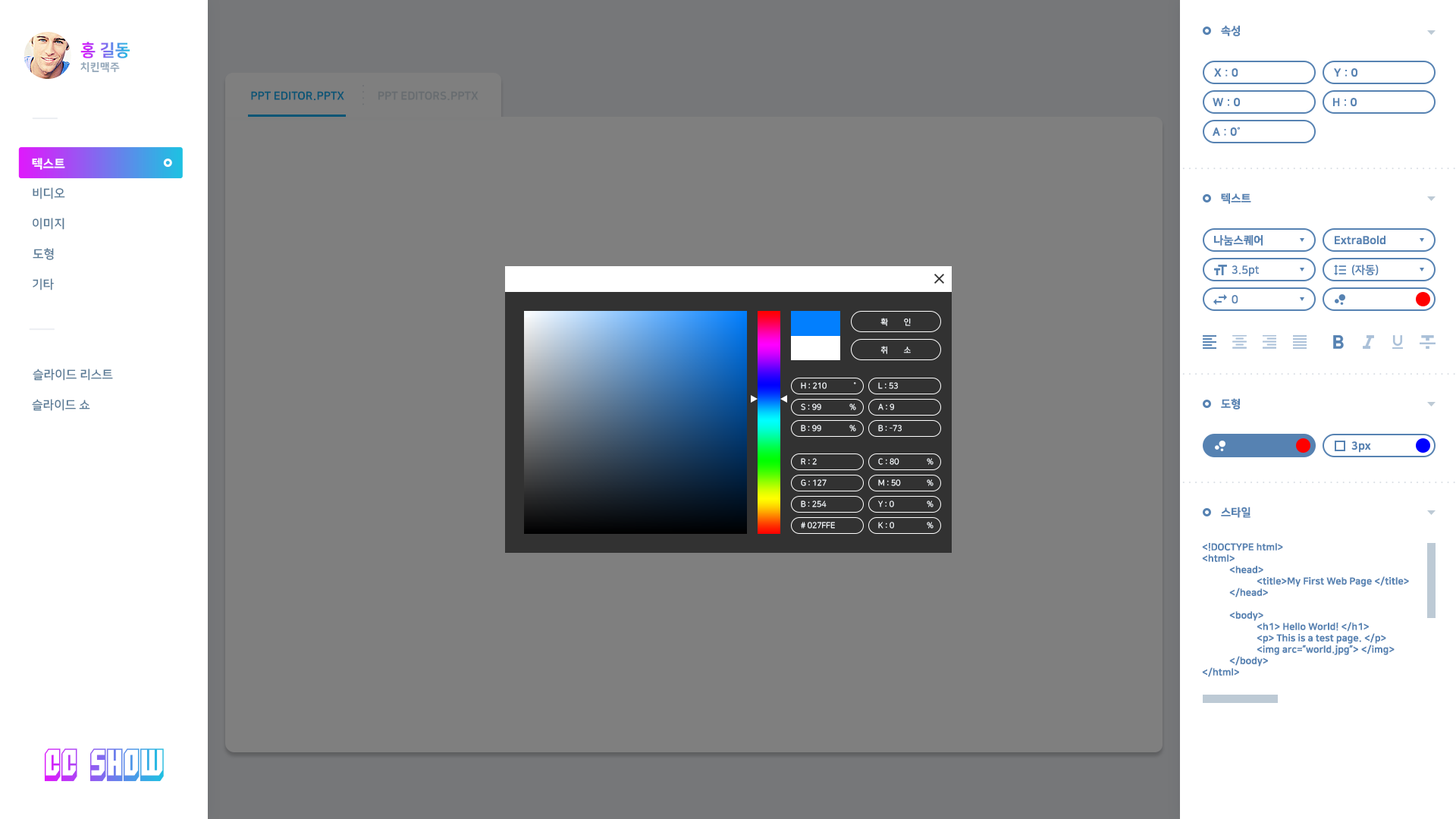
<style>
.page{position:relative;width:1456px;height:819px;background:#7f7f7f}
.page>*{position:absolute;margin:0}
.t1{font:11.1px "NanumSquareEB";color:#5682b2}
.t2{font:16.7px "NanumSquareEB";text-transform:uppercase}
.t3{font:10.6px "NanumSquareEB";letter-spacing:0.025em;color:#94a8ba;text-transform:uppercase}
.t4{font:11.1px "NanumSquareEB";color:#095575;text-transform:uppercase}
.t5{font:11.1px "NanumSquareEB";color:#676c70;text-transform:uppercase}
.t6{font:12.1px "NanumSquareEB";color:#ffffff;text-transform:uppercase}
.t7{font:12.1px "NanumSquareB";color:#597a96;text-transform:uppercase}
.t8{font:11.1px "NanumSquareB";color:#5682b2}
.t9{font:7.9px "NanumSquareR";color:#f7fbfe;text-transform:uppercase}
.t10{font:7.9px "NanumSquareR";text-transform:uppercase}
.t11{font:9.5px "NanumSquareEB";color:#5682b2}
.t12{font:31.6px "Blockt"}
</style>
<div class="page">
<p class="t1" style="left:1221px;top:25px;width:19px;height:11px">속성</p>
<p class="t2" style="left:80px;top:42px;width:50px;height:16px">홍 길동</p>
<p class="t3" style="left:80px;top:61px;width:40px;height:12px">치킨맥주</p>
<p class="t1" style="left:1214px;top:68px;width:24px;height:9px">X : 0</p>
<p class="t1" style="left:1334px;top:68px;width:23px;height:9px">Y : 0</p>
<p class="t4" style="left:251px;top:91px;width:93px;height:10px">PPT editor.pptx</p>
<p class="t5" style="left:378px;top:91px;width:101px;height:10px">PPT EDITORS.PPTX</p>
<p class="t1" style="left:1213px;top:98px;width:27px;height:9px">W : 0</p>
<p class="t1" style="left:1333px;top:98px;width:24px;height:9px">H : 0</p>
<p class="t1" style="left:1213px;top:127px;width:27px;height:9px">A : 0˚</p>
<p class="t6" style="left:32px;top:158px;width:33px;height:12px">텍스트</p>
<p class="t7" style="left:33px;top:187px;width:32px;height:12px">비디오</p>
<p class="t1" style="left:1221px;top:193px;width:30px;height:11px">텍스트</p>
<p class="t7" style="left:33px;top:218px;width:31px;height:12px">이미지</p>
<p class="t1" style="left:1214px;top:235px;width:49px;height:11px">나눔스퀘어</p>
<p class="t1" style="left:1335px;top:235px;width:50px;height:10px">ExtraBold</p>
<p class="t7" style="left:33px;top:248px;width:21px;height:12px">도형</p>
<p class="t8" style="left:1232px;top:265px;width:28px;height:12px">3.5pt</p>
<p class="t8" style="left:1352px;top:265px;width:27px;height:10px">(자동)</p>
<p class="t7" style="left:33px;top:278px;width:21px;height:12px">기타</p>
<p class="t8" style="left:1232px;top:295px;width:6px;height:9px">0</p>
<p class="t9" style="left:880px;top:318px;width:31px;height:8px">확        인</p>
<p class="t9" style="left:880px;top:346px;width:31px;height:8px">취        소</p>
<p class="t7" style="left:33px;top:369px;width:80px;height:12px">슬라이드 리스트</p>
<p class="t9" style="left:801px;top:382px;width:26px;height:7px">H : 210</p>
<p class="t10" style="left:854px;top:382px;width:2px;height:2px">˚</p>
<p class="t9" style="left:878px;top:382px;width:20px;height:7px">L : 53</p>
<p class="t7" style="left:32px;top:399px;width:58px;height:12px">슬라이드 쇼</p>
<p class="t1" style="left:1221px;top:398px;width:19px;height:11px">도형</p>
<p class="t9" style="left:801px;top:403px;width:20px;height:7px">S : 99</p>
<p class="t9" style="left:849px;top:403px;width:7px;height:7px">%</p>
<p class="t9" style="left:878px;top:403px;width:16px;height:7px">A : 9</p>
<p class="t9" style="left:801px;top:425px;width:20px;height:6px">B : 99</p>
<p class="t9" style="left:849px;top:425px;width:7px;height:6px">%</p>
<p class="t9" style="left:878px;top:425px;width:24px;height:6px">B : -73</p>
<p class="t1" style="left:1351px;top:441px;width:20px;height:12px">3px</p>
<p class="t9" style="left:801px;top:458px;width:16px;height:7px">R : 2</p>
<p class="t9" style="left:878px;top:458px;width:21px;height:7px">C : 80</p>
<p class="t9" style="left:927px;top:458px;width:6px;height:7px">%</p>
<p class="t9" style="left:801px;top:479px;width:26px;height:7px">G : 127</p>
<p class="t9" style="left:878px;top:479px;width:23px;height:7px">M : 50</p>
<p class="t9" style="left:927px;top:479px;width:6px;height:7px">%</p>
<p class="t9" style="left:801px;top:500px;width:26px;height:7px">B : 254</p>
<p class="t9" style="left:878px;top:500px;width:16px;height:7px">Y : 0</p>
<p class="t9" style="left:927px;top:500px;width:6px;height:7px">%</p>
<p class="t1" style="left:1221px;top:507px;width:29px;height:11px">스타일</p>
<p class="t9" style="left:801px;top:522px;width:34px;height:7px"># 027ffe</p>
<p class="t9" style="left:878px;top:522px;width:16px;height:7px">K : 0</p>
<p class="t9" style="left:927px;top:522px;width:6px;height:7px">%</p>
<p class="t11" style="left:1202px;top:543px;width:207px;height:134px">&lt;!DOCTYPE html&gt;<br>&lt;html&gt;<br> &lt;head&gt;<br>  &lt;title&gt;My First Web Page &lt;/title&gt;<br> &lt;/head&gt;<br><br> &lt;body&gt;<br>  &lt;h1&gt; Hello World! &lt;/h1&gt;<br>  &lt;p&gt; This is a test page. &lt;/p&gt;<br>  &lt;img arc=”world.jpg”&gt; &lt;/img&gt;<br> &lt;/body&gt;<br>&lt;/html&gt;</p>
<p class="t12" style="left:44px;top:748px;width:120px;height:34px">CC SHOW</p>
</div>
